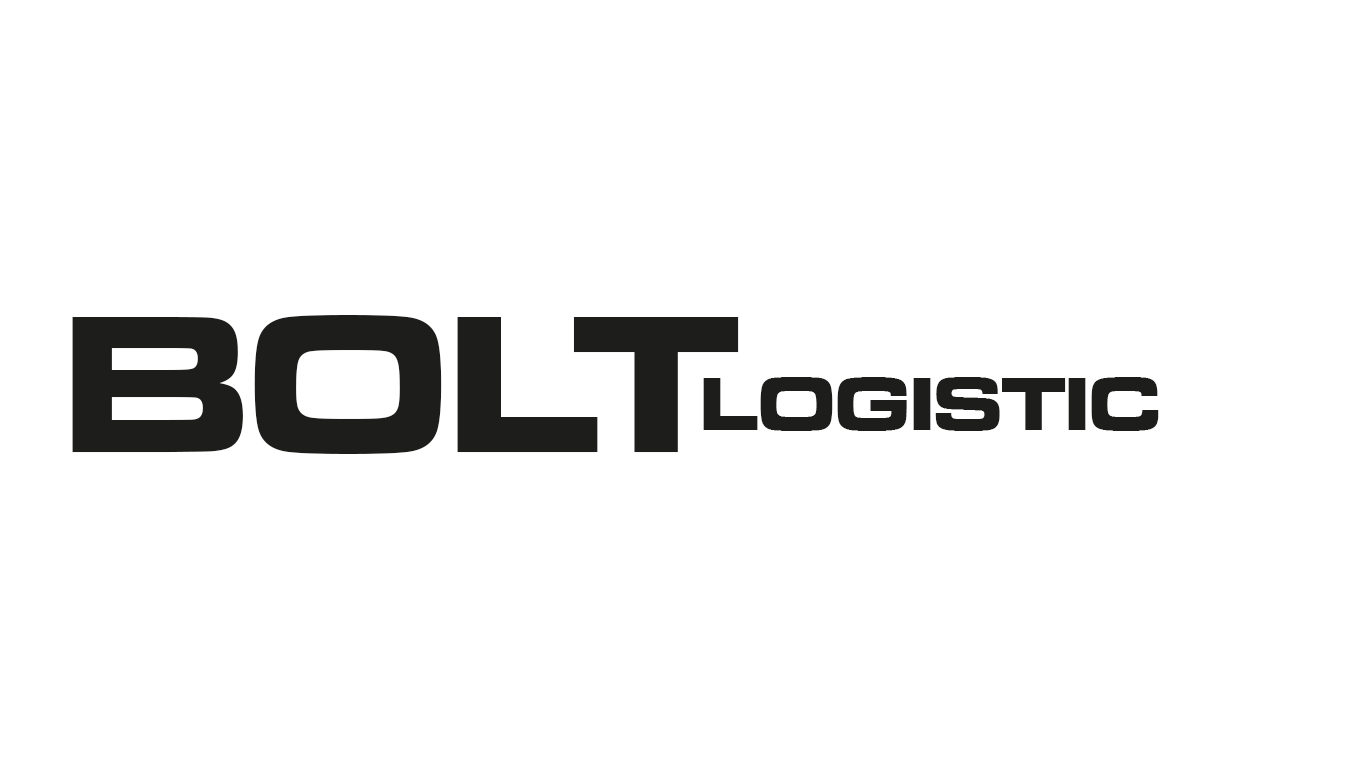
<style>
.page{position:relative;width:1366px;height:768px;background:#ffffff}
.page>*{position:absolute;margin:0}
.t1{font:203.1px "MicrogrammaD-BoldExte";color:#1d1d1b}
.t2{font:78.7px "MicrogrammaD-BoldExte";color:#1d1d1b}
</style>
<div class="page">
<p class="t1" style="left:72px;top:315px;width:667px;height:139px">BOLT</p>
<p class="t2" style="left:703px;top:377px;width:456px;height:54px">LOGISTIC</p>
</div>
